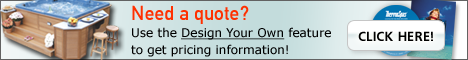
<style>
.page{position:relative;width:468px;height:60px}
.page>*{position:absolute;margin:0}
.t1{font:12px/17px "Verdana";color:#000000}
.t2{font:20px/17px "DinC";color:#ff3000}
.t3{font:12px/17px "Verdana";color:#000000;text-decoration:underline}
.t4{font:13px "font180";color:#000000}
</style>
<div class="page">
<p class="t1" style="left:131px;top:5px;width:200px;height:52px"><span class="t2">Need a quote?<br></span>Use the <span class="t3">Design Your Own</span> feature<br>to get pricing information!</p>
<p class="t4" style="left:358px;top:31px;width:75px;height:10px">CLICK HERE!</p>
</div>
